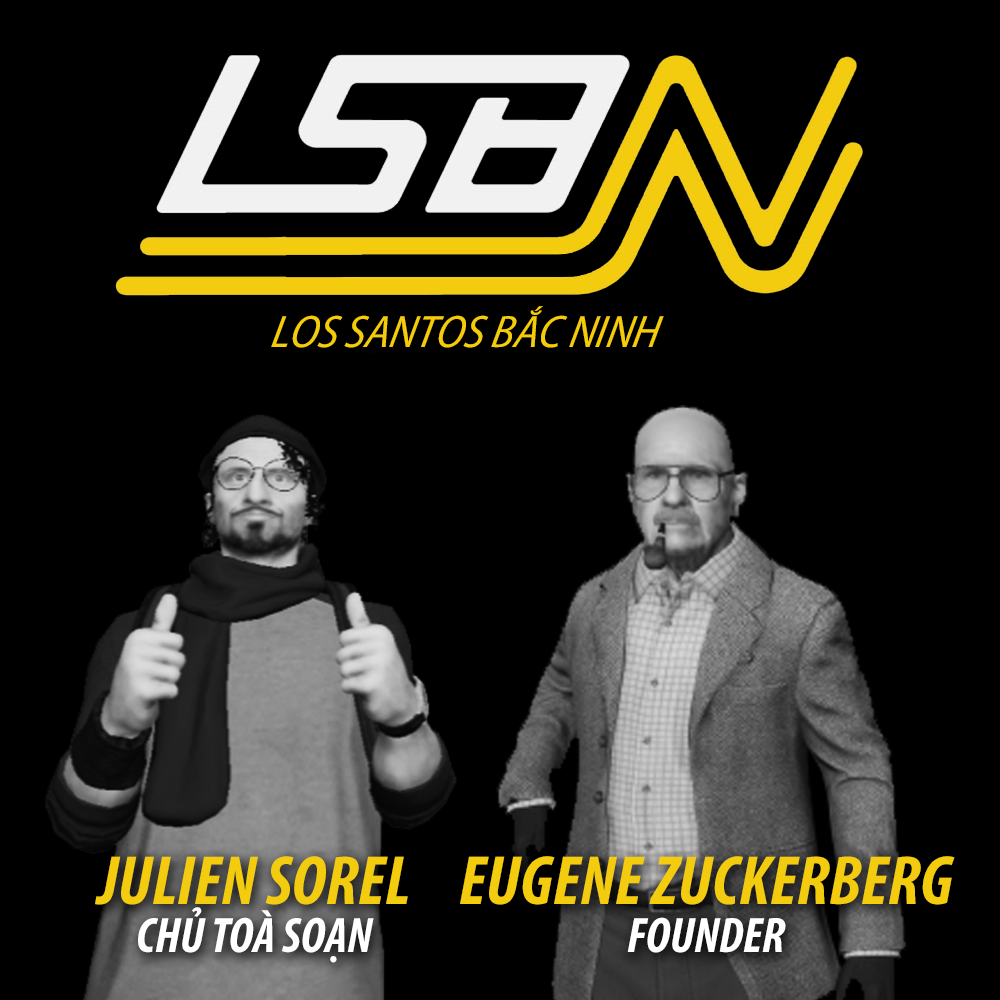
<style>
.page{position:relative;width:1000px;height:1000px;background:#000000}
.page>*{position:absolute;margin:0}
.t1{font:45.7px "MyriadPro-SemiCnIt";color:#f4cc0a;font-style:italic}
.t2{font:70px/48px "MyriadPro-BoldCondIt";color:#f3cc0f}
.t3{font:50px/48px "MyriadPro-BoldCondIt";color:#ffffff}
</style>
<div class="page">
<p class="t1" style="left:271px;top:306px;width:393px;height:42px">LOS SANTOS BẮC NINH</p>
<p class="t2" style="left:95px;top:856px;width:313px;height:107px;text-align:center">JULIEN SOREL<br><span class="t3">CHỦ TOÀ SOẠN</span></p>
<p class="t2" style="left:460px;top:856px;width:495px;height:97px;text-align:center">EUGENE ZUCKERBERG<br><span class="t3">FOUNDER</span></p>
</div>
